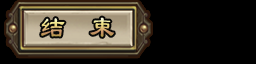
<style>
.page{position:relative;width:256px;height:64px;background:#000000}
.page>*{position:absolute;margin:0}
.t1{font:30px "LiSu";scale:0.83 1}
</style>
<div class="page">
<p class="t1" style="left:41px;top:17px;width:73px;height:20px">结  束</p>
</div>
